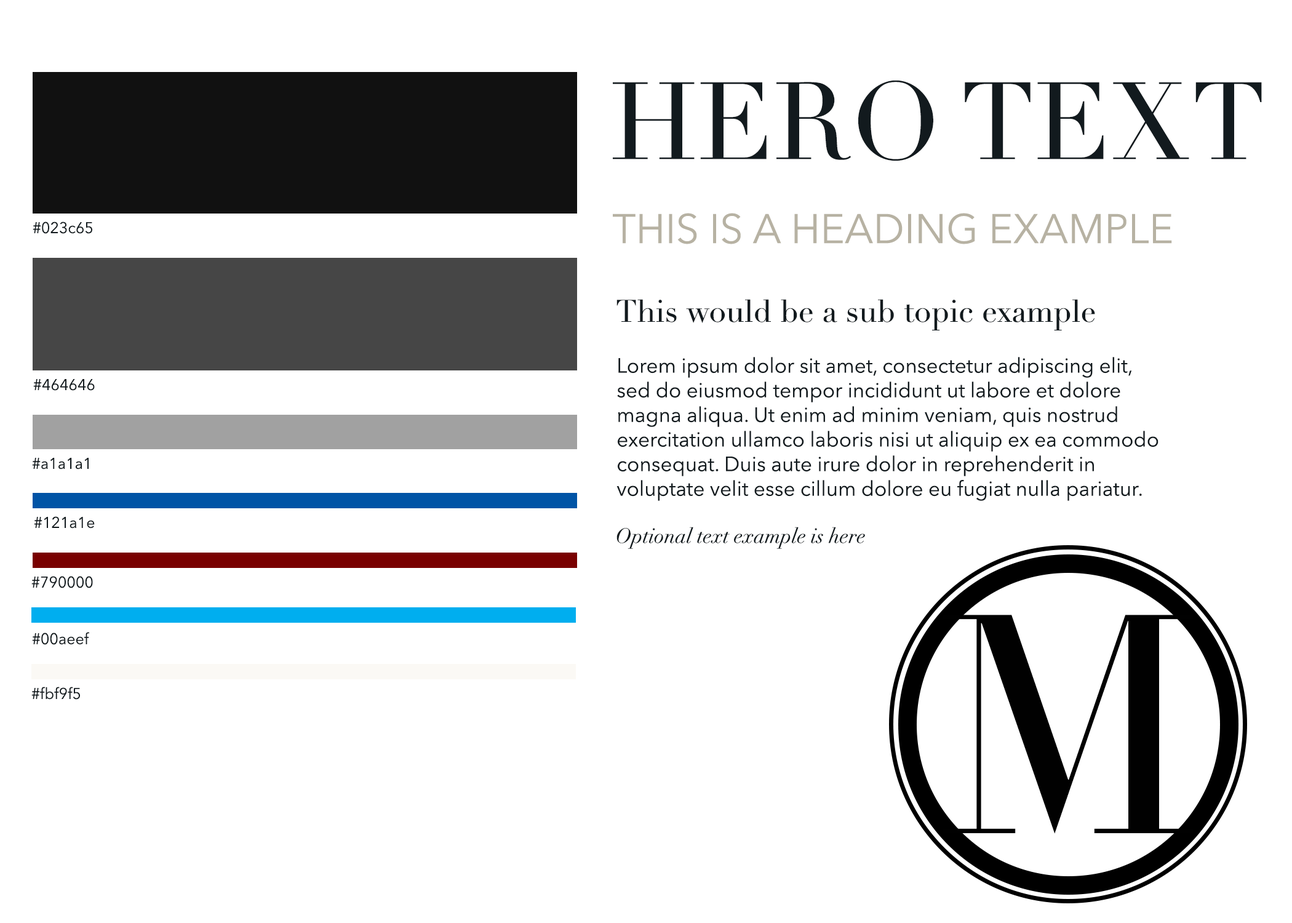
<style>
.page{position:relative;width:1292px;height:923px;background:#ffffff}
.page>*{position:absolute;margin:0}
.t1{font:107.7px "Didot";color:#121a1e}
.t2{font:15.4px "AvenirNext-Regular";color:#121a1e}
.t3{font:41px "AvenirNext-Regular";color:#b7b2a3}
.t4{font:30.8px "Didot";color:#121a1e}
.t5{font:20.5px "AvenirNext-Regular";color:#121a1e}
.t6{font:20.5px "Didot-Italic";color:#121a1e}
.t7{font:306.3px "Didot";color:#010101}
</style>
<div class="page">
<p class="t1" style="left:613px;top:80px;width:649px;height:81px">HERO TEXT</p>
<p class="t2" style="left:33px;top:221px;width:59px;height:13px">#023c65</p>
<p class="t3" style="left:613px;top:213px;width:559px;height:31px">THIS IS A HEADING EXAMPLE</p>
<p class="t4" style="left:616px;top:299px;width:479px;height:31px">This would be a sub topic example</p>
<p class="t5" style="left:616px;top:357px;width:543px;height:144px">Lorem ipsum dolor sit amet, consectetur adipiscing elit, <br>sed do eiusmod tempor incididunt ut labore et dolore <br>magna aliqua. Ut enim ad minim veniam, quis nostrud <br>exercitation ullamco laboris nisi ut aliquip ex ea commodo <br>consequat. Duis aute irure dolor in reprehenderit in <br>voluptate velit esse cillum dolore eu fugiat nulla pariatur.</p>
<p class="t2" style="left:33px;top:379px;width:62px;height:12px">#464646</p>
<p class="t2" style="left:32px;top:458px;width:57px;height:11px">#a1a1a1</p>
<p class="t2" style="left:34px;top:516px;width:61px;height:13px">#121a1e</p>
<p class="t6" style="left:616px;top:527px;width:249px;height:22px">Optional text example is here</p>
<p class="t2" style="left:31px;top:576px;width:62px;height:12px">#790000</p>
<p class="t7" style="left:943px;top:615px;width:251px;height:219px">M</p>
<p class="t2" style="left:32px;top:632px;width:57px;height:13px">#00aeef</p>
<p class="t2" style="left:31px;top:687px;width:49px;height:13px">#fbf9f5</p>
</div>
